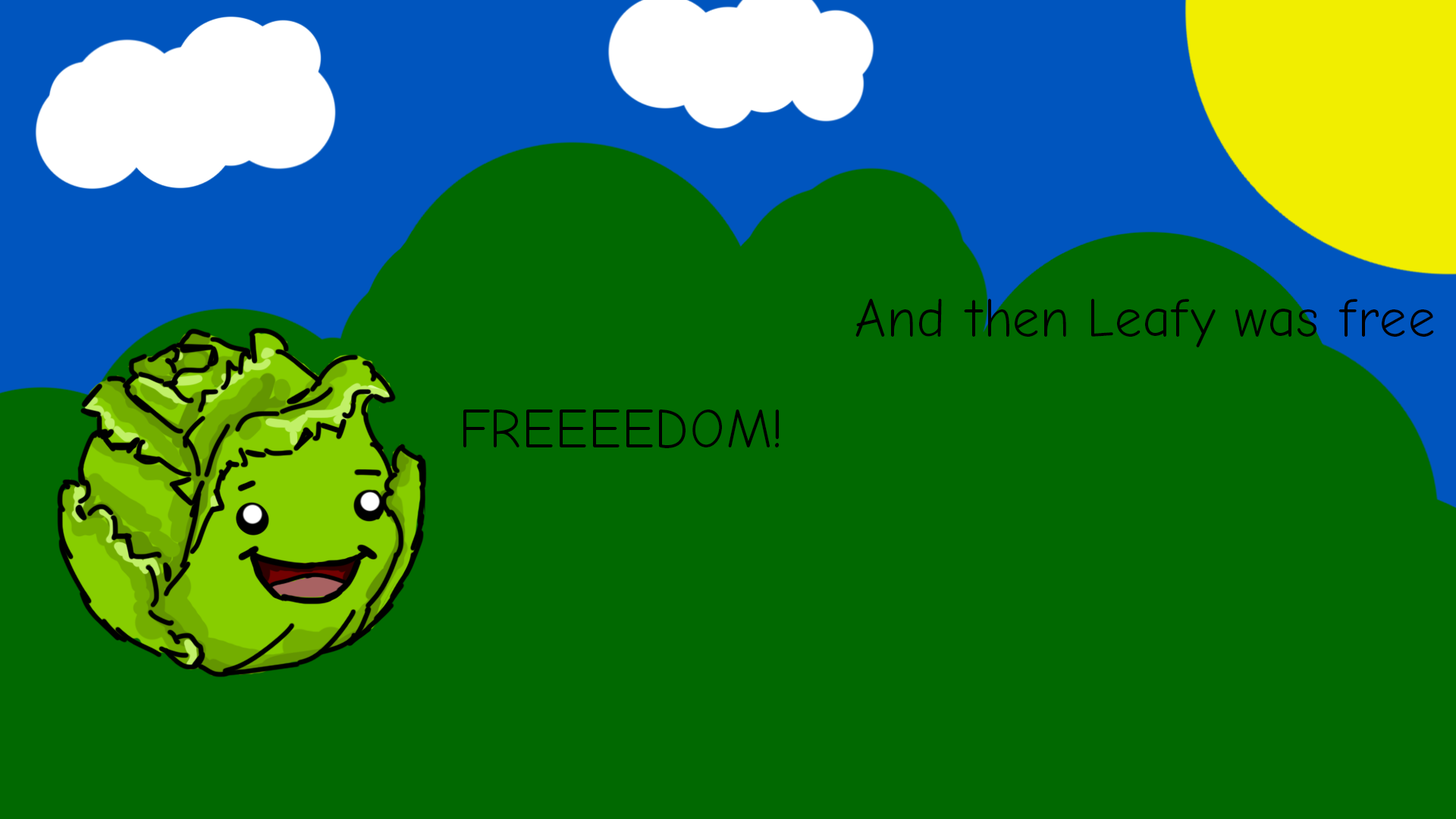
<style>
.page{position:relative;width:1456px;height:819px;background:#016901}
.page>*{position:absolute;margin:0}
.t1{font:54.6px "ComicNeue";color:#000000}
</style>
<div class="page">
<p class="t1" style="left:855px;top:299px;width:579px;height:48px">And then Leafy was free</p>
<p class="t1" style="left:463px;top:409px;width:317px;height:39px">FREEEEDOM!</p>
</div>
